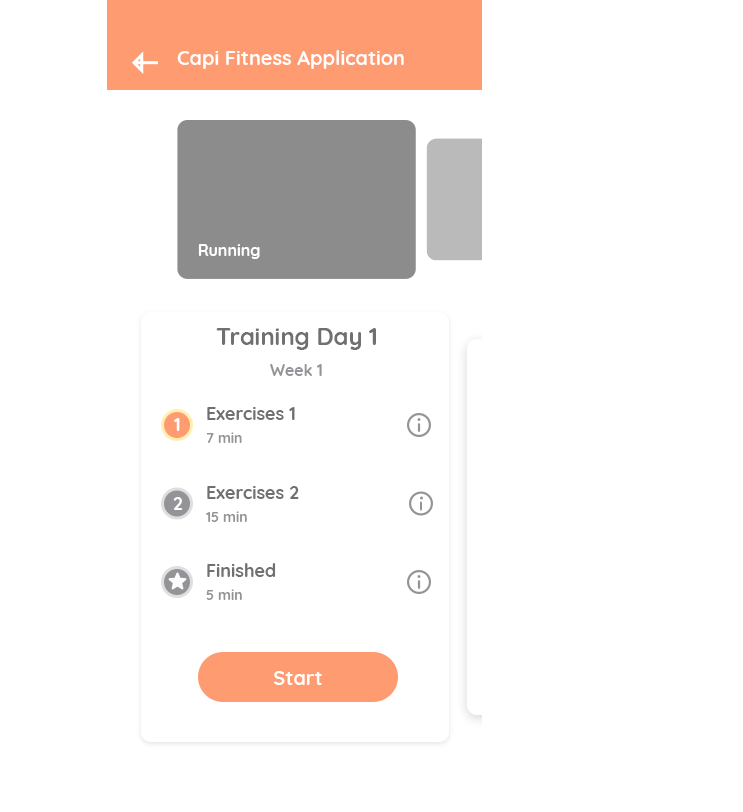
<style>
.page{position:relative;width:743px;height:812px;background:#ffffff}
.page>*{position:absolute;margin:0}
.t1{font:20px "Quicksand-Bold";color:#ffffff}
.t2{font:16px "Quicksand-Bold";color:#ffffff}
.t3{font:24px "Quicksand-Bold";color:#707070}
.t4{font:16px "Quicksand-Bold";color:#949397}
.t5{font:18px "Quicksand-Bold";color:#707070}
.t6{font:18px "Quicksand-Bold";color:#ffffff}
.t7{font:14px "Quicksand-Bold";color:#949397}
</style>
<div class="page">
<p class="t1" style="left:177px;top:50px;width:227px;height:19px">Capi Fitness Application</p>
<p class="t2" style="left:198px;top:244px;width:62px;height:15px">Running</p>
<p class="t3" style="left:216px;top:328px;width:160px;height:22px">Training Day 1</p>
<p class="t4" style="left:270px;top:364px;width:52px;height:12px">Week 1</p>
<p class="t5" style="left:207px;top:407px;width:88px;height:13px">Exercises 1</p>
<p class="t6" style="left:174px;top:418px;width:6px;height:13px">1</p>
<p class="t7" style="left:206px;top:432px;width:36px;height:11px">7 min</p>
<p class="t5" style="left:207px;top:486px;width:92px;height:13px">Exercises 2</p>
<p class="t6" style="left:173px;top:497px;width:10px;height:13px">2</p>
<p class="t7" style="left:206px;top:511px;width:41px;height:11px">15 min</p>
<p class="t5" style="left:207px;top:563px;width:69px;height:14px">Finished</p>
<p class="t7" style="left:206px;top:589px;width:36px;height:11px">5 min</p>
<p class="t1" style="left:274px;top:671px;width:48px;height:14px">Start</p>
</div>
